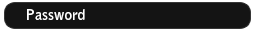
<style>
.page{position:relative;width:260px;height:30px;background:#141414}
.page>*{position:absolute;margin:0}
.t1{font:14.8px "BellGothicStd-Bold";color:#ffffff}
</style>
<div class="page">
<p class="t1" style="left:27px;top:9px;width:58px;height:11px">Password</p>
</div>
